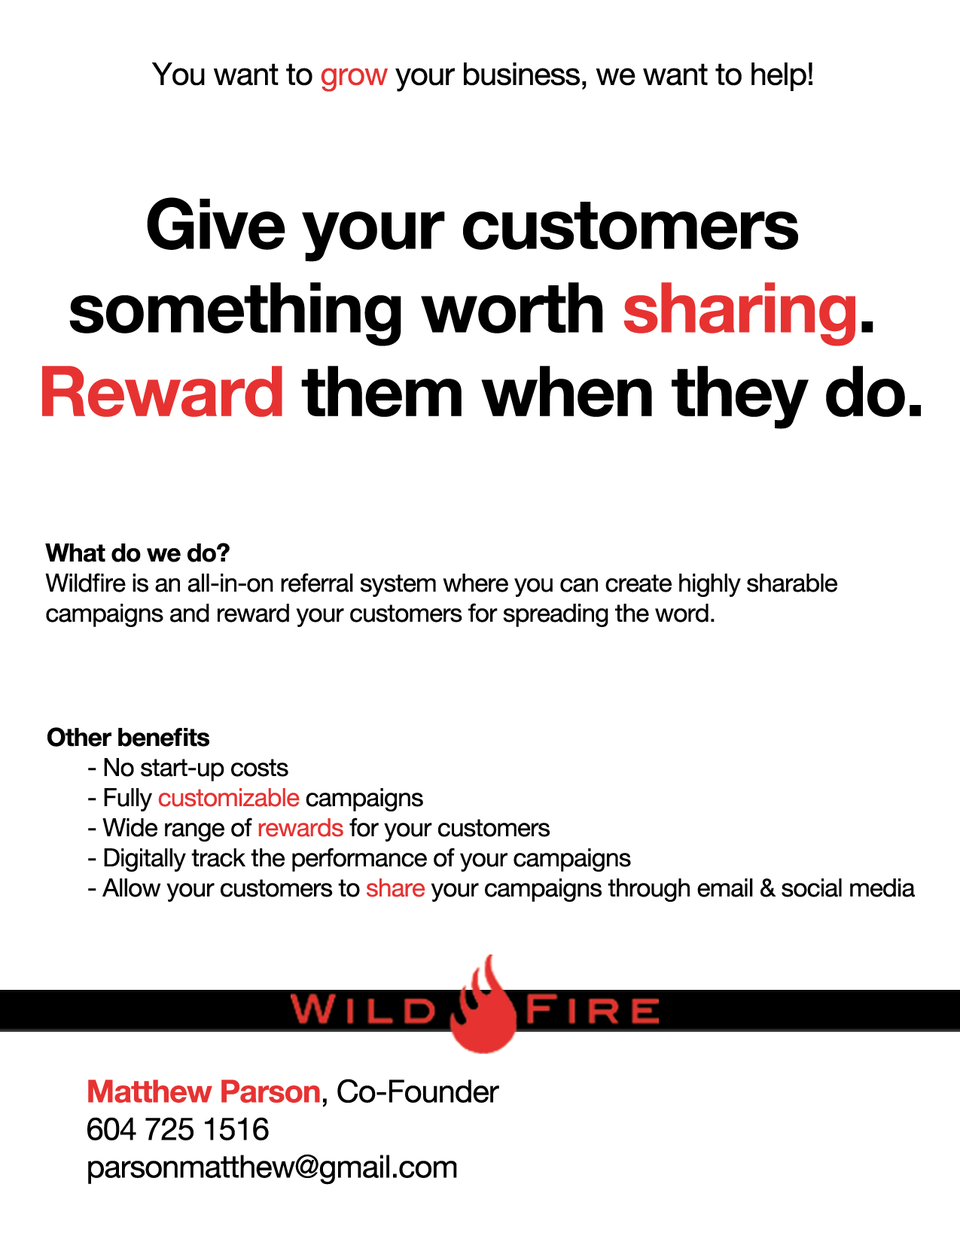
<style>
.page{position:relative;width:960px;height:1242px;background:#ffffff}
.page>*{position:absolute;margin:0}
.t1{font:31.4px "HelveticaNeue";letter-spacing:-0.025em;color:#000000}
.t2{font:31.4px "HelveticaNeue";letter-spacing:-0.025em;color:#e73232}
.t3{font:69.7px "HelveticaNeue-Bold";letter-spacing:-0.025em;color:#000000}
.t4{font:69.7px "HelveticaNeue-Bold";letter-spacing:-0.025em;color:#e73232}
.t5{font:25.1px "HelveticaNeue";letter-spacing:-0.025em;color:#000000}
.t6{font:25.1px "HelveticaNeue-Bold";letter-spacing:-0.025em;color:#000000}
.t7{font:25.1px "HelveticaNeue";letter-spacing:-0.025em;color:#e73232}
.t8{font:31.4px "HelveticaNeue-Bold";letter-spacing:-0.025em;color:#e73232}
</style>
<div class="page">
<p class="t1" style="left:151px;top:62px;width:661px;height:30px">You want to <span class="t2">grow</span> your business, we want to help!</p>
<p class="t3" style="left:42px;top:197px;width:879px;height:232px;text-align:center">Give your customers <br>something worth <span class="t4">sharing</span>. <br><span class="t4">Reward</span> them when they do.</p>
<p class="t5" style="left:45px;top:543px;width:792px;height:84px"><span class="t6">What do we do?</span> <br>Wildfire is an all-in-on referral system where you can create highly sharable <br>campaigns and reward your customers for spreading the word.</p>
<p class="t5" style="left:47px;top:727px;width:868px;height:175px"><span class="t6">Other benefits<br> </span>- No start-up costs<br> - Fully <span class="t7">customizable</span> campaigns<br> - Wide range of <span class="t7">rewards</span> for your customers <br> - Digitally track the performance of your campaigns<br> - Allow your customers to<span class="t7"> share</span> your campaigns through email &amp; social media</p>
<p class="t1" style="left:87px;top:1079px;width:412px;height:106px"><span class="t8">Matthew Parson</span>, Co-Founder <br>604 725 1516<br>parsonmatthew@gmail.com</p>
</div>
